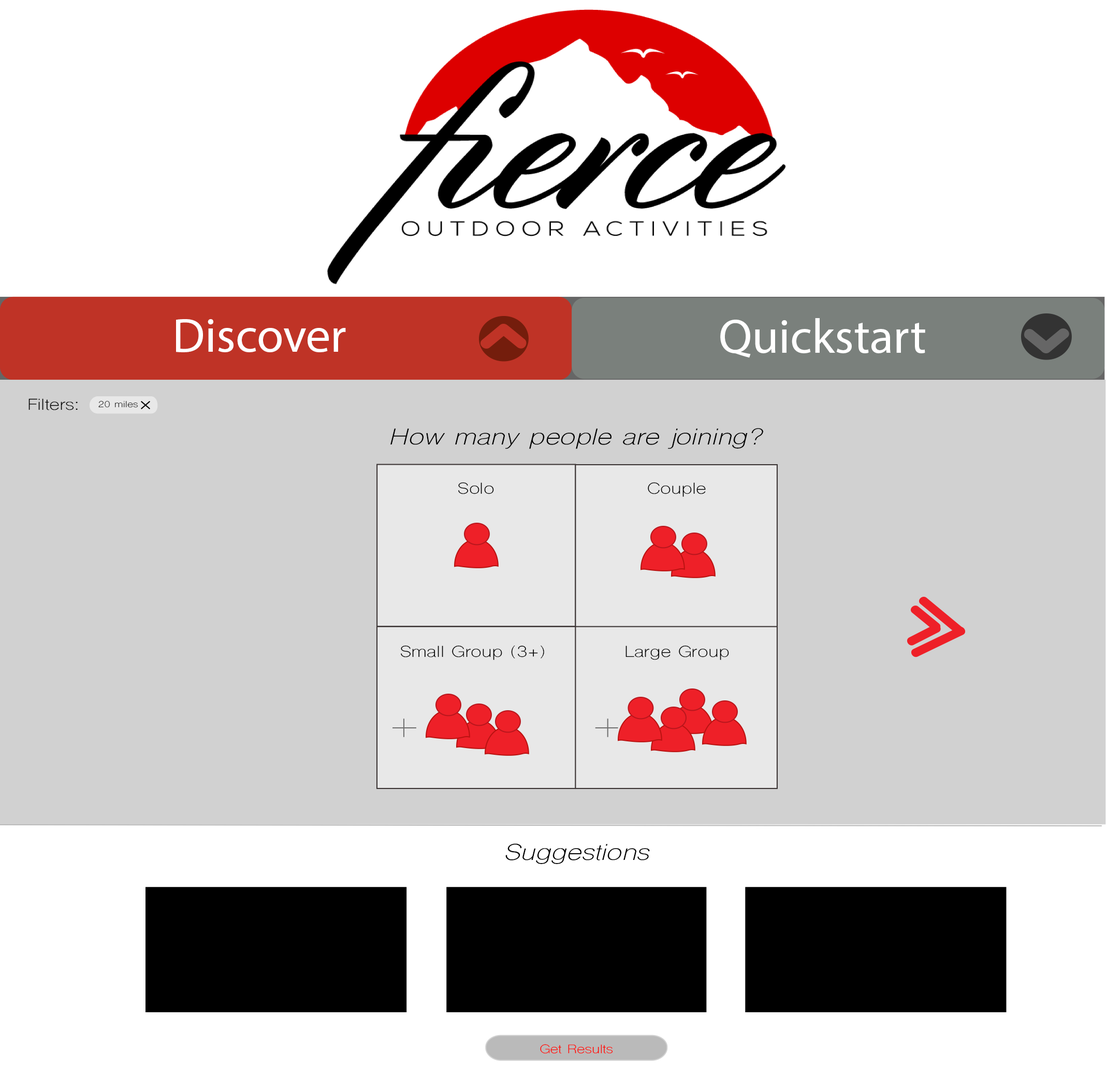
<style>
.page{position:relative;width:1107px;height:1077px;background:#ffffff}
.page>*{position:absolute;margin:0}
.t1{font:48.6px "MyriadPro-Regular";color:#ffffff}
.t2{font:14.9px "ShreeDev0714";color:#000000;scale:1.23 1}
.t3{font:8.3px "ShreeDev0714";color:#000000;scale:1.23 1}
.t4{font:21.6px "ShreeDev0714-Italic";color:#000000;scale:1.23 1}
.t5{font:11.6px "ShreeDev0714";color:#ff0400;scale:1.23 1}
</style>
<div class="page">
<p class="t1" style="left:176px;top:319px;width:170px;height:33px">Discover</p>
<p class="t1" style="left:720px;top:318px;width:206px;height:40px">Quickstart</p>
<p class="t2" style="left:28px;top:398px;width:50px;height:12px">Filters:</p>
<p class="t3" style="left:98px;top:400px;width:40px;height:8px">20 miles</p>
<p class="t4" style="left:391px;top:428px;width:372px;height:21px">How many people are joining?</p>
<p class="t2" style="left:458px;top:482px;width:36px;height:12px">Solo</p>
<p class="t2" style="left:648px;top:482px;width:58px;height:15px">Couple</p>
<p class="t2" style="left:401px;top:645px;width:143px;height:15px">Small Group (3+)</p>
<p class="t2" style="left:626px;top:645px;width:103px;height:15px">Large Group</p>
<p class="t4" style="left:506px;top:843px;width:144px;height:21px">Suggestions</p>
<p class="t5" style="left:540px;top:1044px;width:73px;height:10px">Get Results</p>
</div>
